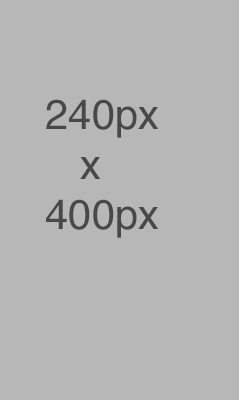
<style>
.page{position:relative;width:240px;height:400px;background:#b7b7b7}
.page>*{position:absolute;margin:0}
.t1{font:41.7px "Helvetica";color:#494848}
</style>
<div class="page">
<p class="t1" style="left:46px;top:99px;width:112px;height:139px">240px <br>       x    <br>    400px</p>
</div>
